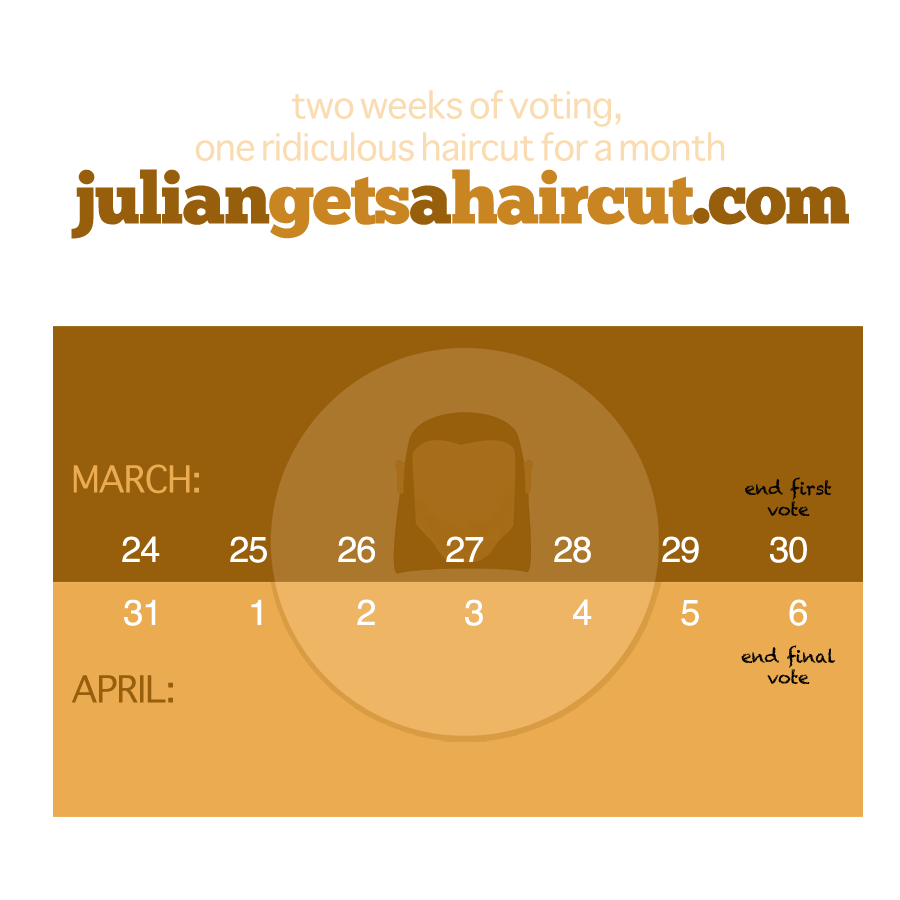
<style>
.page{position:relative;width:900px;height:900px;background:#ffffff}
.page>*{position:absolute;margin:0}
.t1{font:36px/21px "Sathu";letter-spacing:-0.025em;color:#f9dcb2}
.t2{font:72px/21px "ChunkFive-Roman";letter-spacing:-0.025em;color:#975e0c}
.t3{font:72px/21px "ChunkFive-Roman";letter-spacing:-0.025em;color:#ca8523}
.t4{font:18px/21px "Chalkduster";letter-spacing:-0.025em;color:#000000}
</style>
<div class="page">
<p class="t1" style="left:71px;top:90px;width:778px;height:149px;text-align:center">two weeks of voting, <br><br>one ridiculous haircut for a month<br><br><br><span class="t2">julian</span><span class="t3">gets</span><span class="t2">a</span><span class="t3">haircut</span><span class="t2">.com</span></p>
<p class="t4" style="left:741px;top:477px;width:95px;height:208px;text-align:center">end first<br>vote<br><br><br><br><br><br><br>end final<br>vote</p>
</div>
